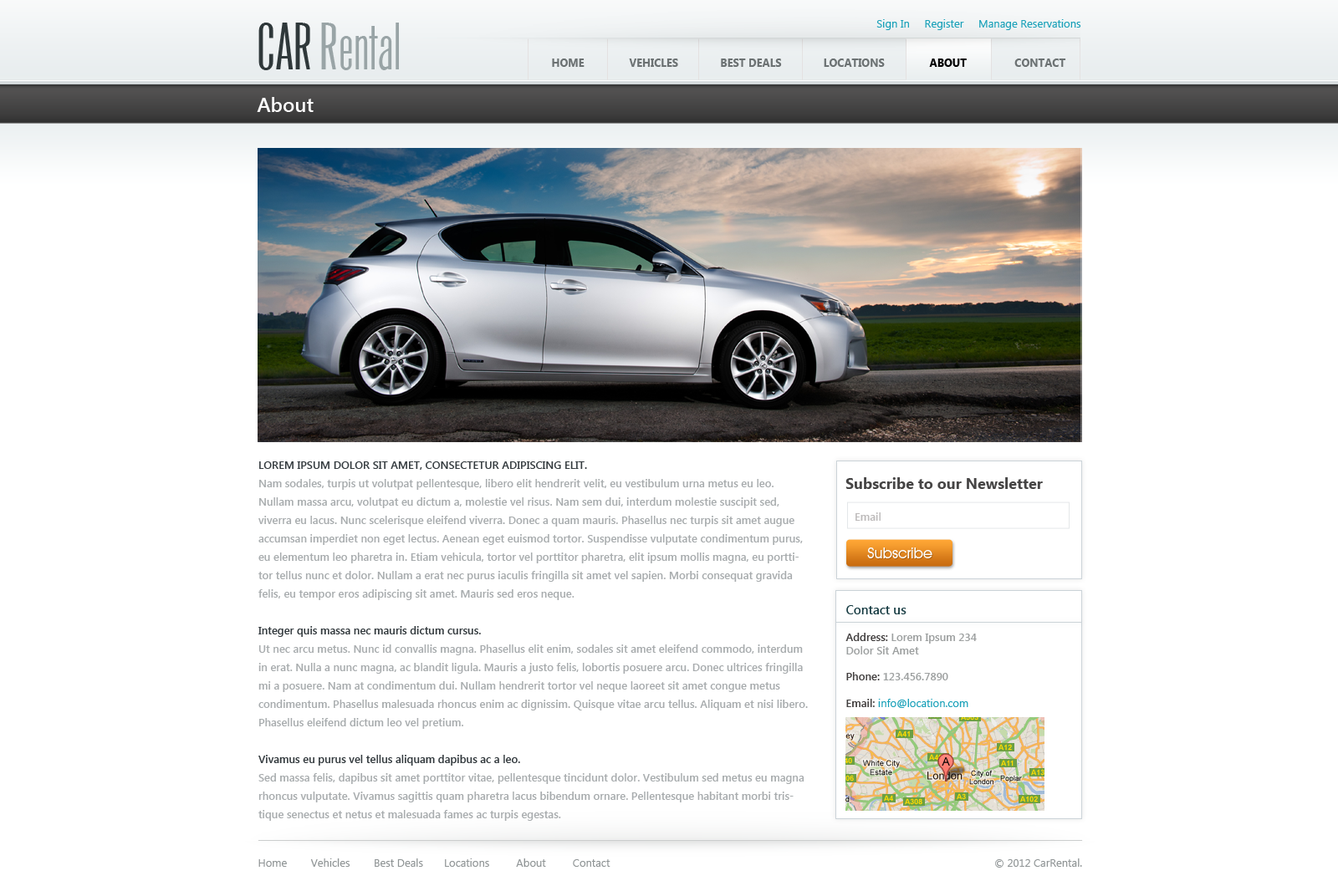
<style>
.page{position:relative;width:1338px;height:891px;background:#ffffff}
.page>*{position:absolute;margin:0}
.t1{font:60.2px "Arizona";color:#99a4a6}
.t2{font:60.2px "Arizona";color:#2f383a;text-transform:uppercase}
.t3{font:10.9px "SegoeUI";color:#1aa1b9}
.t4{font:10.9px "SegoeUI-Bold";color:#6c7273;text-transform:uppercase}
.t5{font:10.9px "SegoeUI-Bold";color:#000000;text-transform:uppercase}
.t6{font:20.1px "SegoeUI-SemiBold";color:#fefefe}
.t7{font:10.9px/18.4px "SegoeUI-SemiBold";color:#a8acae}
.t8{font:10.9px/18.4px "SegoeUI-SemiBold";color:#333a3e;text-transform:uppercase}
.t9{font:10.9px/18.4px "SegoeUI-SemiBold";color:#333a3e}
.t10{font:15.1px "SegoeUI-Bold";color:#464545}
.t11{font:10.9px "SegoeUI-SemiBold";color:#bdbaba}
.t12{font:15.1px "AvantGardeITCbyBT-Book";color:#ffffff}
.t13{font:10.9px "SegoeUI-SemiBold";color:#9da0a0}
.t14{font:12.5px "SegoeUI-SemiBold";color:#193d44}
.t15{font:10.9px "SegoeUI-SemiBold";color:#423f3f}
.t16{font:10.9px "SegoeUI";color:#909596}
</style>
<div class="page">
<p class="t1" style="left:258px;top:23px;width:141px;height:47px"><span class="t2">Car</span> Rental</p>
<p class="t3" style="left:876px;top:19px;width:205px;height:11px">Sign In     Register     Manage Reservations</p>
<p class="t4" style="left:552px;top:59px;width:514px;height:8px">Home               Vehicles              Best Deals              Locations               <span class="t5">About                </span>Contact</p>
<p class="t6" style="left:257px;top:97px;width:57px;height:15px">About</p>
<p class="t7" style="left:258px;top:462px;width:550px;height:359px"><span class="t8">Lorem ipsum dolor sit amet, consectetur adipiscing elit. <br></span>Nam sodales, turpis ut volutpat pellentesque, libero elit hendrerit velit, eu vestibulum urna metus eu leo. Nullam massa arcu, volutpat eu dictum a, molestie vel risus. Nam sem dui, interdum molestie suscipit sed, viverra eu lacus. Nunc scelerisque eleifend viverra. Donec a quam mauris. Phasellus nec turpis sit amet augue accumsan imperdiet non eget lectus. Aenean eget euismod tortor. Suspendisse vulputate condimentum purus, eu elementum leo pharetra in. Etiam vehicula, tortor vel porttitor pharetra, elit ipsum mollis magna, eu porttitor tellus nunc et dolor. Nullam a erat nec purus iaculis fringilla sit amet vel sapien. Morbi consequat gravida felis, eu tempor eros adipiscing sit amet. Mauris sed eros neque.<br><br><span class="t9">Integer quis massa nec mauris dictum cursus. <br></span>Ut nec arcu metus. Nunc id convallis magna. Phasellus elit enim, sodales sit amet eleifend commodo, interdum in erat. Nulla a nunc magna, ac blandit ligula. Mauris a justo felis, lobortis posuere arcu. Donec ultrices fringilla mi a posuere. Nam at condimentum dui. Nullam hendrerit tortor vel neque laoreet sit amet congue metus condimentum. Phasellus malesuada rhoncus enim ac dignissim. Quisque vitae arcu tellus. Aliquam et nisi libero. Phasellus eleifend dictum leo vel pretium.<br><br><span class="t9">Vivamus eu purus vel tellus aliquam dapibus ac a leo.</span> <br>Sed massa felis, dapibus sit amet porttitor vitae, pellentesque tincidunt dolor. Vestibulum sed metus eu magna rhoncus vulputate. Vivamus sagittis quam pharetra lacus bibendum ornare. Pellentesque habitant morbi tristique senectus et netus et malesuada fames ac turpis egestas.</p>
<p class="t10" style="left:845px;top:477px;width:198px;height:12px">Subscribe to our Newsletter</p>
<p class="t11" style="left:855px;top:513px;width:25px;height:8px">Email</p>
<p class="t12" style="left:867px;top:548px;width:65px;height:11px">Subscribe</p>
<p class="t13" style="left:845px;top:605px;width:132px;height:103px"><span class="t14">Contact us<br><br></span><span class="t15">Address:</span> Lorem Ipsum 234<br>Dolor Sit Amet<br><br><span class="t15">Phone:</span> 123.456.7890<br><br><span class="t15">Email: </span><span class="t3">info@location.com</span></p>
<p class="t16" style="left:258px;top:859px;width:352px;height:8px">Home        Vehicles        Best Deals       Locations         About         Contact</p>
<p class="t16" style="left:995px;top:859px;width:87px;height:9px">© 2012 CarRental.</p>
</div>
